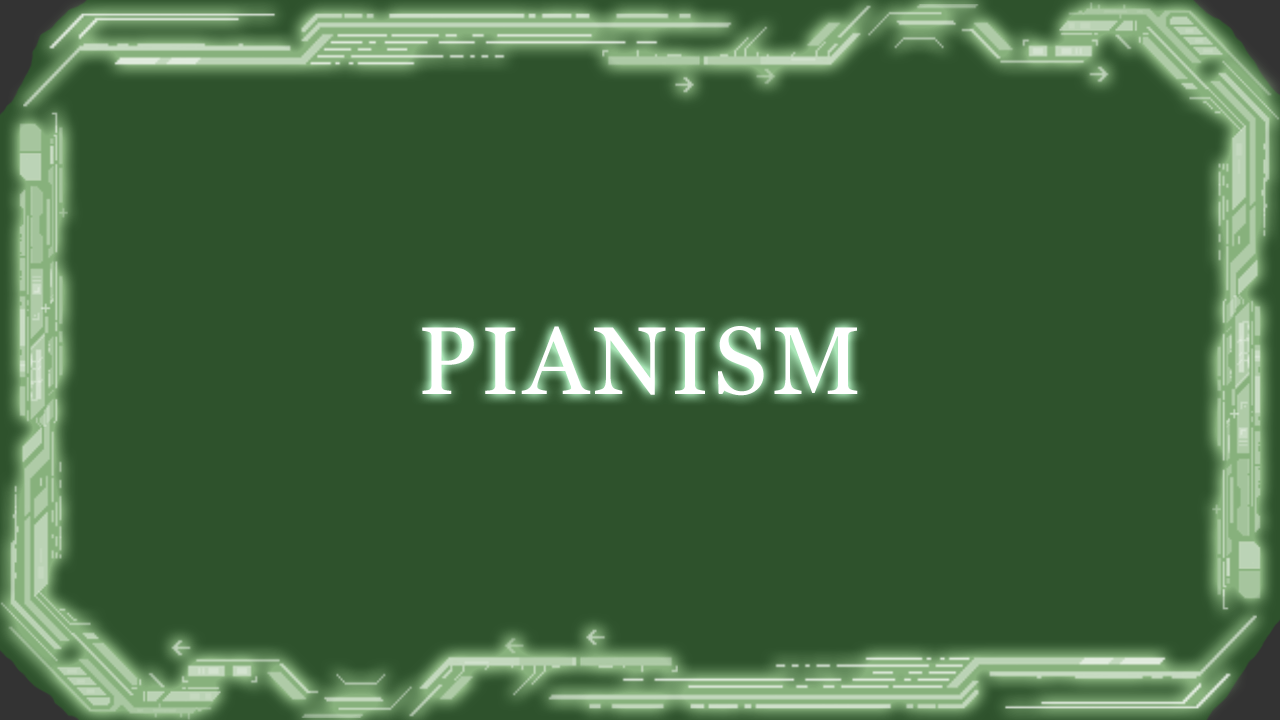
<style>
.page{position:relative;width:1280px;height:720px;background:#2e522c}
.page>*{position:absolute;margin:0}
.t1{font:96px "Vani";letter-spacing:0.05em;color:#ffffff}
</style>
<div class="page">
<p class="t1" style="left:422px;top:326px;width:436px;height:70px">PIANISM</p>
</div>
